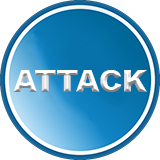
<style>
.page{position:relative;width:160px;height:160px;background:#ffffff}
.page>*{position:absolute;margin:0}
.t1{font:30px "Arial-Black"}
</style>
<div class="page">
<p class="t1" style="left:13px;top:70px;width:134px;height:22px">ATTACK</p>
</div>
